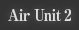
<style>
.page{position:relative;width:79px;height:30px;background:#333333}
.page>*{position:absolute;margin:0}
.t1{font:16px "RyuminPro-ExBold";letter-spacing:-0.04em;color:#dfdfdf;scale:0.9 1}
</style>
<div class="page">
<p class="t1" style="left:8px;top:9px;width:63px;height:12px">Air Unit 2</p>
</div>
